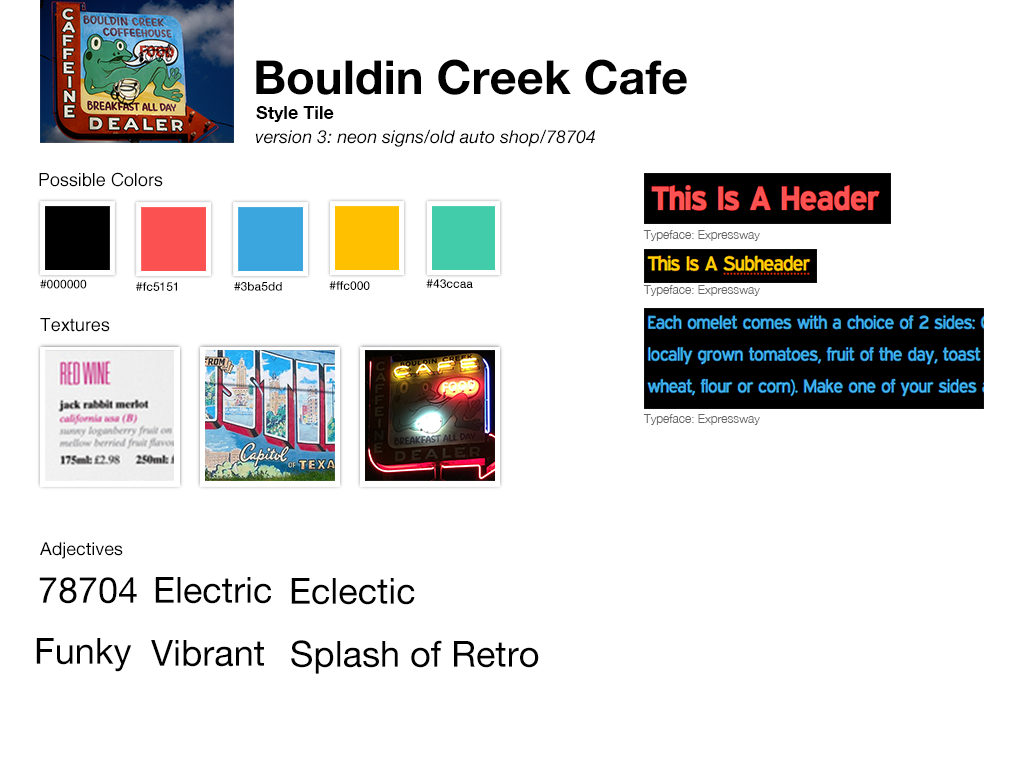
<style>
.page{position:relative;width:1020px;height:760px;background:#ffffff}
.page>*{position:absolute;margin:0}
.t1{font:47px "HelveticaNeue-Bold";color:#000000}
.t2{font:18px "HelveticaNeue-Bold";color:#000000}
.t3{font:18px "HelveticaNeue-Italic";color:#000000}
.t4{font:18px "Helvetica";color:#000000}
.t5{font:12px "HelveticaNeue-Light";color:#666666}
.t6{font:12px "HelveticaNeue-Medium";color:#000000}
.t7{font:18px "HelveticaNeue";color:#000000}
.t8{font:36px "HelveticaNeue";color:#000000}
</style>
<div class="page">
<p class="t1" style="left:256px;top:59px;width:431px;height:36px">Bouldin Creek Cafe</p>
<p class="t2" style="left:256px;top:106px;width:78px;height:16px">Style Tile</p>
<p class="t3" style="left:255px;top:129px;width:340px;height:18px">version 3: neon signs/old auto shop/78704</p>
<p class="t4" style="left:39px;top:172px;width:124px;height:15px">Possible Colors</p>
<p class="t5" style="left:643px;top:230px;width:117px;height:11px">Typeface: Expressway</p>
<p class="t6" style="left:40px;top:279px;width:47px;height:10px">#000000</p>
<p class="t6" style="left:329px;top:281px;width:41px;height:9px">#ffc000</p>
<p class="t6" style="left:426px;top:279px;width:47px;height:9px">#43ccaa</p>
<p class="t6" style="left:136px;top:282px;width:41px;height:9px">#fc5151</p>
<p class="t6" style="left:234px;top:282px;width:48px;height:9px">#3ba5dd</p>
<p class="t5" style="left:643px;top:285px;width:117px;height:11px">Typeface: Expressway</p>
<p class="t4" style="left:40px;top:318px;width:70px;height:14px">Textures</p>
<p class="t5" style="left:643px;top:414px;width:117px;height:11px">Typeface: Expressway</p>
<p class="t7" style="left:40px;top:542px;width:83px;height:17px">Adjectives</p>
<p class="t8" style="left:39px;top:577px;width:98px;height:27px">78704</p>
<p class="t8" style="left:155px;top:577px;width:117px;height:27px">Electric</p>
<p class="t8" style="left:291px;top:578px;width:124px;height:27px">Eclectic</p>
<p class="t8" style="left:36px;top:638px;width:96px;height:34px">Funky</p>
<p class="t8" style="left:151px;top:640px;width:113px;height:27px">Vibrant</p>
<p class="t8" style="left:291px;top:640px;width:248px;height:34px">Splash of Retro</p>
</div>
